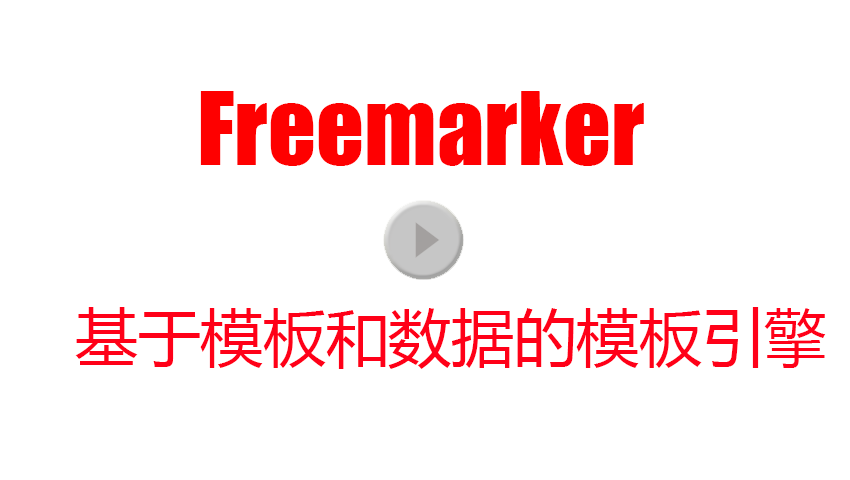
<style>
.page{position:relative;width:850px;height:480px;background:#ffffff}
.page>*{position:absolute;margin:0}
.t1{font:94px "Impact";color:#fe0000}
.t2{font:62.7px "MicrosoftYaHei";color:#ff0018}
</style>
<div class="page">
<p class="t1" style="left:200px;top:91px;width:444px;height:75px">Freemarker</p>
<p class="t2" style="left:75px;top:307px;width:751px;height:62px">基于模板和数据的模板引擎</p>
</div>
